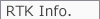
<style>
.page{position:relative;width:100px;height:19px;background:#fafafa}
.page>*{position:absolute;margin:0}
.t1{font:14px "Verdana";color:#464646}
</style>
<div class="page">
<p class="t1" style="left:7px;top:5px;width:64px;height:12px">RTK Info.</p>
</div>
